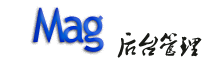
<style>
.page{position:relative;width:215px;height:69px;background:#ffffff}
.page>*{position:absolute;margin:0}
.t1{font:48px "TrebuchetMS";letter-spacing:-0.075em;scale:0.95 1}
.t2{font:24px "2.0-";letter-spacing:-0.075em;color:#191a16;scale:0.95 1}
</style>
<div class="page">
<p class="t1" style="left:33px;top:7px;width:71px;height:45px">Mag</p>
<p class="t2" style="left:117px;top:32px;width:85px;height:26px">后台管理</p>
</div>
